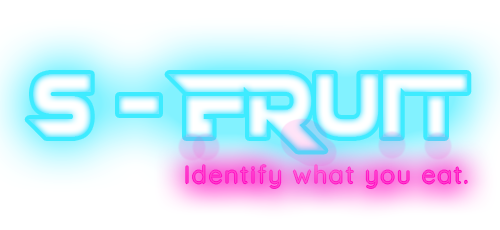
<style>
.page{position:relative;width:500px;height:230px;background:#ffffff}
.page>*{position:absolute;margin:0}
.t1{font:91.8px "Revolvingdor"}
.t2{font:24px "Quicksand-Light";letter-spacing:0.1em;color:#ff3dcb}
</style>
<div class="page">
<p class="t1" style="left:28px;top:74px;width:440px;height:77px">S - FRUIT</p>
<p class="t2" style="left:186px;top:165px;width:281px;height:23px">Identify what you eat.</p>
</div>
